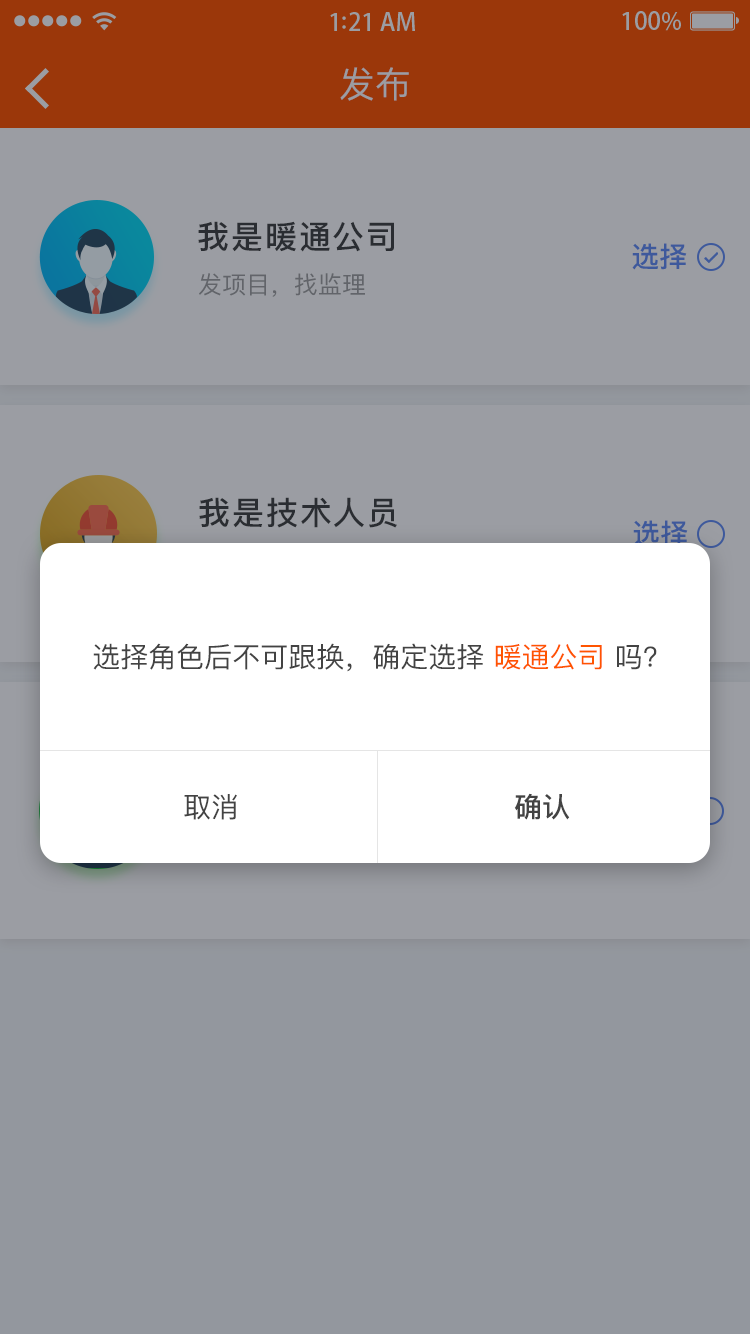
<style>
.page{position:relative;width:750px;height:1334px;background:#9b9da3}
.page>*{position:absolute;margin:0}
.t1{font:36px "PingFangSC-Regular";color:#9b9da3}
.t2{font:32px "PingFangSC-Medium";letter-spacing:0.06em;color:#2a2d32}
.t3{font:28px "PingFangSC-Medium";color:#3e599c}
.t4{font:24px "PingFangSC-Regular";color:#62646a}
.t5{font:28px "PingFangSC-Medium";color:#3d589a}
.t6{font:28px "PingFangSC-Regular";color:#434343}
.t7{font:28px "PingFangSC-Regular";color:#ff5400}
.t8{font:28px "PingFangSC-Medium";color:#434343}
</style>
<div class="page">
<p class="t1" style="left:340px;top:67px;width:69px;height:34px">发布</p>
<p class="t2" style="left:198px;top:221px;width:196px;height:31px">我是暖通公司</p>
<p class="t3" style="left:632px;top:243px;width:55px;height:27px">选择</p>
<p class="t4" style="left:199px;top:273px;width:166px;height:24px">发项目，找监理</p>
<p class="t2" style="left:199px;top:497px;width:198px;height:31px">我是技术人员</p>
<p class="t5" style="left:633px;top:520px;width:55px;height:27px">选择</p>
<p class="t6" style="left:93px;top:643px;width:564px;height:29px">选择角色后不可跟换，确定选择 <span class="t7">暖通公司</span> 吗?</p>
<p class="t6" style="left:184px;top:794px;width:53px;height:26px">取消</p>
<p class="t8" style="left:514px;top:793px;width:56px;height:27px">确认</p>
</div>
